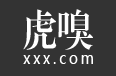
<style>
.page{position:relative;width:116px;height:76px;background:#333333}
.page>*{position:absolute;margin:0}
.t1{font:43.2px "FZXBSJW--GB1-0";color:#ffffff;scale:0.83 1}
.t2{font:16.8px "MicrosoftYaHei";letter-spacing:0.2em;color:#ffffff;scale:0.83 1}
</style>
<div class="page">
<p class="t1" style="left:23px;top:9px;width:70px;height:41px">虎嗅</p>
<p class="t2" style="left:23px;top:55px;width:70px;height:9px">xxx.com</p>
</div>
